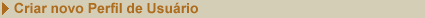
<style>
.page{position:relative;width:425px;height:18px;background:#d4ceb7}
.page>*{position:absolute;margin:0}
.t1{font:13.9px "Arial-BoldMT";color:#ae6c1e}
</style>
<div class="page">
<p class="t1" style="left:14px;top:2px;width:184px;height:12px">Criar novo Perfil de Usuário</p>
</div>
